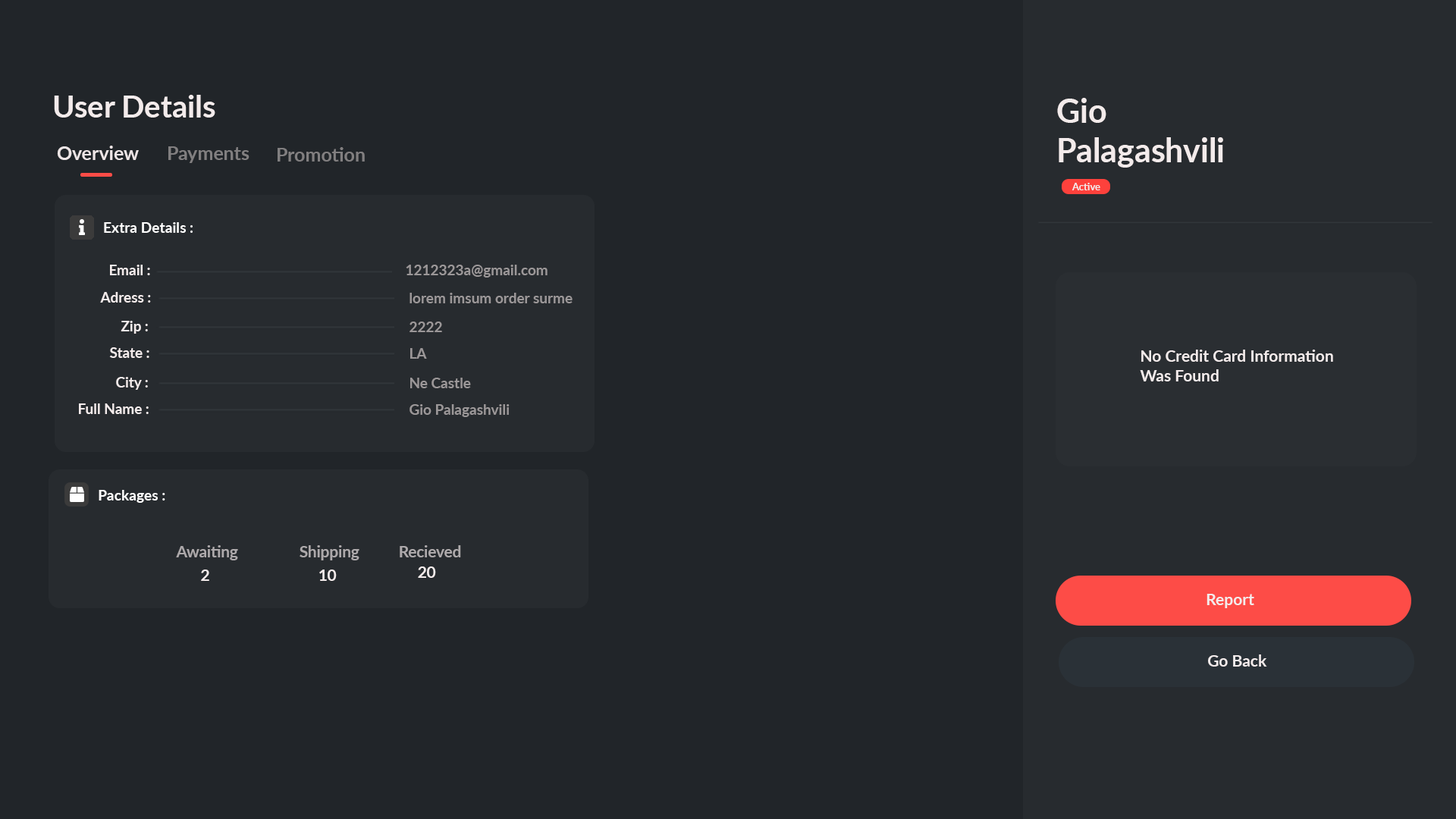
<style>
.page{position:relative;width:1456px;height:819px;background:#212529}
.page>*{position:absolute;margin:0}
.t1{font:30.3px "Lato-Bold";color:#f3ebeb}
.t2{font:32.5px "Lato-Bold";color:#f3ebeb}
.t3{font:19px "Lato-Bold";color:#f3ebeb}
.t4{font:19px "Lato-Bold";color:#817f80}
.t5{font:9.9px "Lato-Bold";color:#f3ebeb}
.t6{font:14.6px "Lato-Bold";color:#ffffff}
.t7{font:14.4px "Lato-Bold";color:#f3ebeb}
.t8{font:14.4px "Lato-Bold";color:#9b9798}
.t9{font:15.9px "Lato-Bold";color:#f3ebeb}
.t10{font:15.6px "Lato-Bold";color:#ada9ab}
.t11{font:15.6px "Lato-Bold";color:#f3ebeb}
</style>
<div class="page">
<p class="t1" style="left:54px;top:95px;width:161px;height:23px">User Details</p>
<p class="t2" style="left:1057px;top:98px;width:166px;height:70px">Gio <br>Palagashvili</p>
<p class="t3" style="left:57px;top:146px;width:82px;height:14px;opacity:0.96">Overview</p>
<p class="t4" style="left:168px;top:146px;width:81px;height:17px">Payments</p>
<p class="t4" style="left:278px;top:147px;width:87px;height:15px">Promotion</p>
<p class="t5" style="left:1072px;top:183px;width:28px;height:7px">Active</p>
<p class="t6" style="left:104px;top:222px;width:89px;height:11px">Extra Details :</p>
<p class="t7" style="left:110px;top:265px;width:40px;height:10px">Email :</p>
<p class="t8" style="left:406px;top:265px;width:142px;height:13px">1212323a@gmail.com</p>
<p class="t7" style="left:100px;top:292px;width:51px;height:11px">Adress :</p>
<p class="t8" style="left:409px;top:293px;width:164px;height:10px">lorem imsum order surme</p>
<p class="t7" style="left:121px;top:321px;width:27px;height:13px">Zip :</p>
<p class="t8" style="left:409px;top:322px;width:33px;height:10px">2222</p>
<p class="t7" style="left:109px;top:347px;width:40px;height:11px">State :</p>
<p class="t8" style="left:410px;top:348px;width:17px;height:11px">LA</p>
<p class="t9" style="left:1140px;top:350px;width:193px;height:31px">No Credit Card Information <br>Was Found</p>
<p class="t7" style="left:116px;top:377px;width:32px;height:13px">City :</p>
<p class="t8" style="left:410px;top:378px;width:61px;height:10px">Ne Castle</p>
<p class="t7" style="left:79px;top:403px;width:70px;height:11px">Full Name :</p>
<p class="t8" style="left:409px;top:404px;width:101px;height:13px">Gio Palagashvili</p>
<p class="t6" style="left:99px;top:490px;width:66px;height:13px">Packages :</p>
<p class="t10" style="left:176px;top:545px;width:62px;height:15px">Awaiting</p>
<p class="t10" style="left:300px;top:545px;width:59px;height:15px">Shipping</p>
<p class="t10" style="left:400px;top:545px;width:61px;height:12px">Recieved</p>
<p class="t11" style="left:201px;top:570px;width:8px;height:11px">2</p>
<p class="t11" style="left:319px;top:570px;width:18px;height:11px">10</p>
<p class="t11" style="left:418px;top:566px;width:18px;height:12px">20</p>
<p class="t9" style="left:1206px;top:594px;width:48px;height:14px">Report</p>
<p class="t9" style="left:1208px;top:654px;width:59px;height:13px">Go Back</p>
</div>
